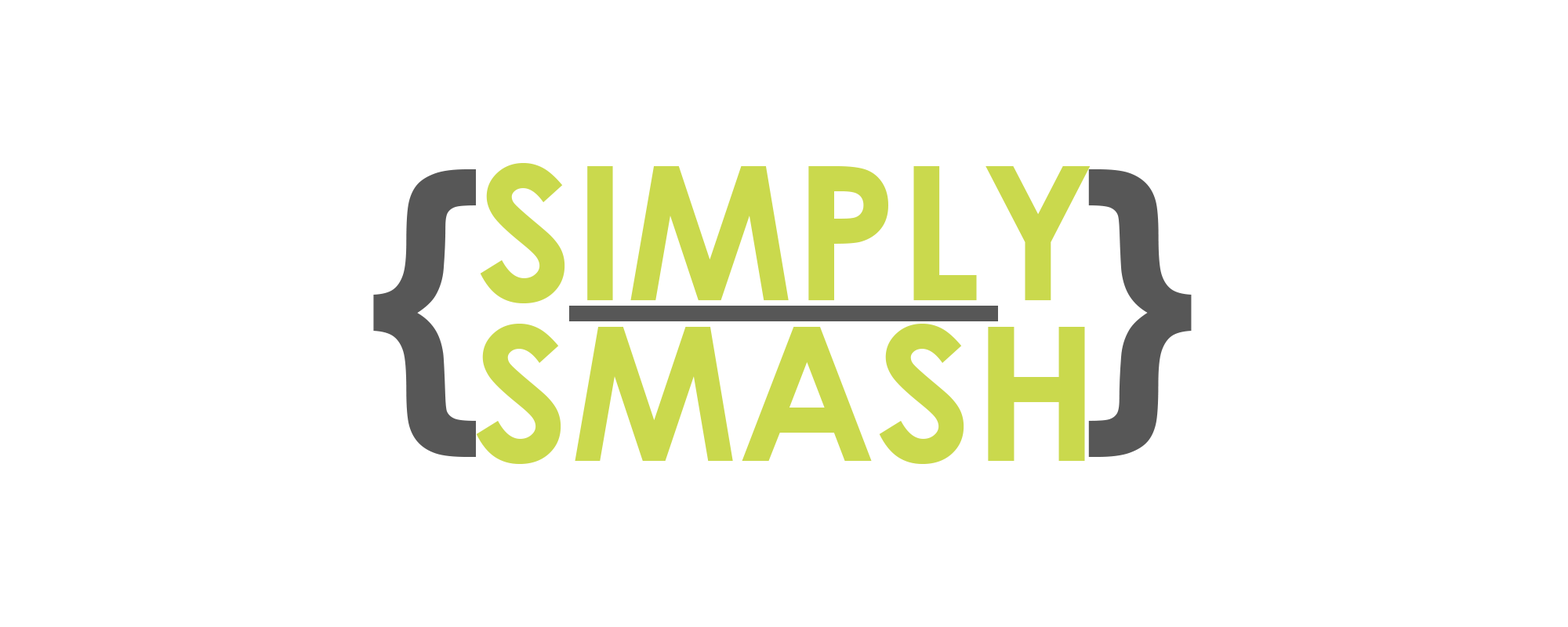
<style>
.page{position:relative;width:1568px;height:627px;background:#ffffff}
.page>*{position:absolute;margin:0}
.t1{font:306.5px "CenturyGothic-Bold";color:#575757;text-transform:uppercase}
.t2{font:186.6px/160.7px "CenturyGothic-Bold";color:#cad94d;text-transform:uppercase}
</style>
<div class="page">
<p class="t1" style="left:373px;top:169px;width:103px;height:288px">{</p>
<p class="t2" style="left:476px;top:163px;width:615px;height:301px;text-align:center">Simply<br>Smash</p>
<p class="t1" style="left:1088px;top:169px;width:104px;height:288px">}</p>
</div>
